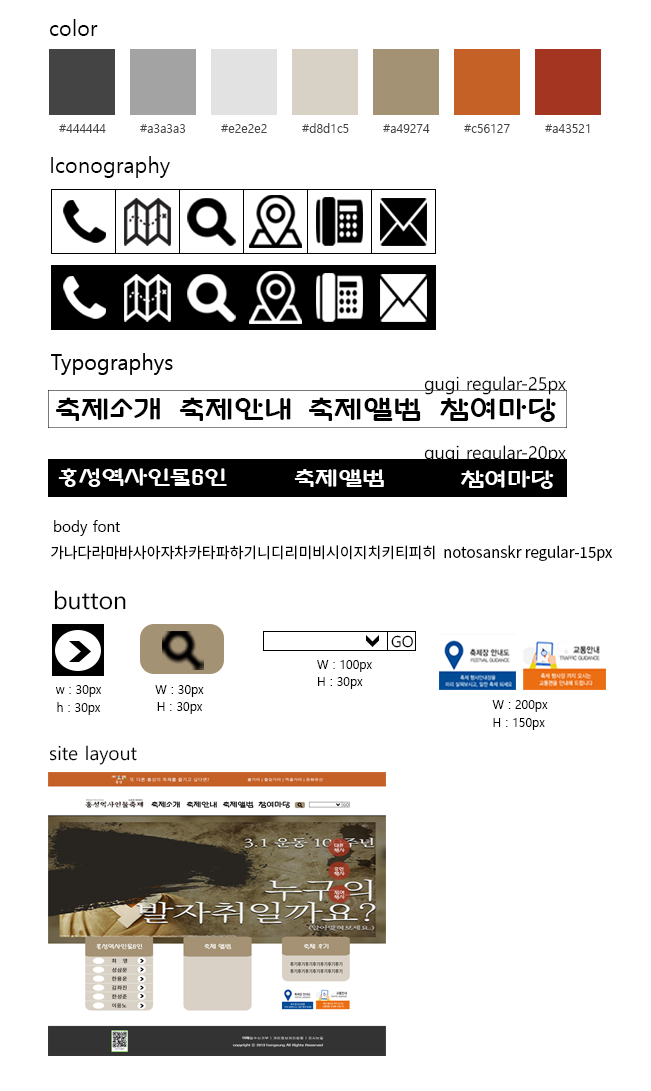
<style>
.page{position:relative;width:651px;height:1091px;background:#ffffff}
.page>*{position:absolute;margin:0}
.t1{font:22px "MalgunGothic";color:#000000}
.t2{font:12px "MalgunGothic";color:#444444}
.t3{font:17.8px "MalgunGothic";color:#000000}
.t4{font:25px "Gugi-Regular";color:#000000;scale:1.19 1}
.t5{font:20px "Gugi-Regular";color:#ffffff;scale:1.19 1}
.t6{font:15px "MalgunGothic";color:#000000}
.t7{font:15px "NotoSansKR-Regular";color:#000000}
.t8{font:24px "MalgunGothic";color:#000000}
.t9{font:15.3px "MalgunGothic";color:#000000}
.t10{font:12px/17.9px "MalgunGothic";color:#000000}
.t11{font:18.7px "MalgunGothic";color:#000000}
</style>
<div class="page">
<p class="t1" style="left:49px;top:19px;width:49px;height:17px">color</p>
<p class="t2" style="left:59px;top:124px;width:47px;height:9px">#444444</p>
<p class="t2" style="left:140px;top:124px;width:46px;height:9px">#a3a3a3</p>
<p class="t2" style="left:221px;top:124px;width:46px;height:9px">#e2e2e2</p>
<p class="t2" style="left:302px;top:123px;width:47px;height:10px">#d8d1c5</p>
<p class="t2" style="left:383px;top:124px;width:47px;height:9px">#a49274</p>
<p class="t2" style="left:464px;top:124px;width:46px;height:9px">#c56127</p>
<p class="t2" style="left:545px;top:124px;width:45px;height:9px">#a43521</p>
<p class="t1" style="left:51px;top:156px;width:119px;height:22px">Iconography</p>
<p class="t3" style="left:424px;top:376px;width:142px;height:19px">gugi regular-25px</p>
<p class="t4" style="left:55px;top:397px;width:105px;height:24px">축제소개</p>
<p class="t4" style="left:179px;top:397px;width:112px;height:24px">축제안내</p>
<p class="t4" style="left:308px;top:397px;width:113px;height:24px">축제앨범</p>
<p class="t4" style="left:440px;top:398px;width:116px;height:24px">참여마당</p>
<p class="t3" style="left:424px;top:445px;width:142px;height:19px">gugi regular-20px</p>
<p class="t5" style="left:58px;top:468px;width:169px;height:19px">홍성역사인물6인</p>
<p class="t5" style="left:294px;top:469px;width:90px;height:18px">축제앨범</p>
<p class="t5" style="left:461px;top:470px;width:93px;height:19px">참여마당</p>
<p class="t6" style="left:54px;top:520px;width:66px;height:16px">body font</p>
<p class="t7" style="left:51px;top:545px;width:562px;height:16px">가나다라마바사아자차카타파하기니디리미비시이지치키티피히  notosanskr regular-15px</p>
<p class="t8" style="left:54px;top:590px;width:72px;height:20px">button</p>
<p class="t9" style="left:391px;top:635px;width:22px;height:13px">GO</p>
<p class="t10" style="left:317px;top:660px;width:55px;height:29px">W : 100px<br>H : 30px</p>
<p class="t10" style="left:55px;top:685px;width:47px;height:30px;text-align:center">w : 30px<br>h : 30px</p>
<p class="t10" style="left:155px;top:685px;width:49px;height:29px;text-align:center">W : 30px<br>H : 30px</p>
<p class="t10" style="left:492px;top:700px;width:56px;height:30px">W : 200px<br>H : 150px</p>
<p class="t11" style="left:49px;top:745px;width:88px;height:20px">site layout</p>
</div>
